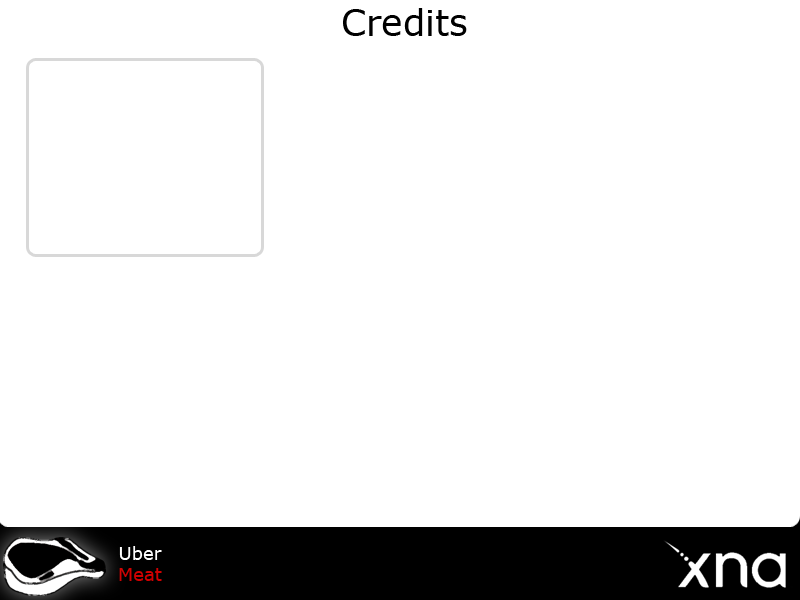
<style>
.page{position:relative;width:800px;height:600px;background:#ffffff}
.page>*{position:absolute;margin:0}
.t1{font:36px "Verdana";color:#000000}
.t2{font:18px "Verdana";color:#ffffff}
.t3{font:18px "Verdana";color:#d10000}
</style>
<div class="page">
<p class="t1" style="left:343px;top:8px;width:124px;height:28px">Credits</p>
<p class="t2" style="left:119px;top:546px;width:43px;height:35px;text-align:center">Uber<br><span class="t3">Meat</span></p>
</div>
